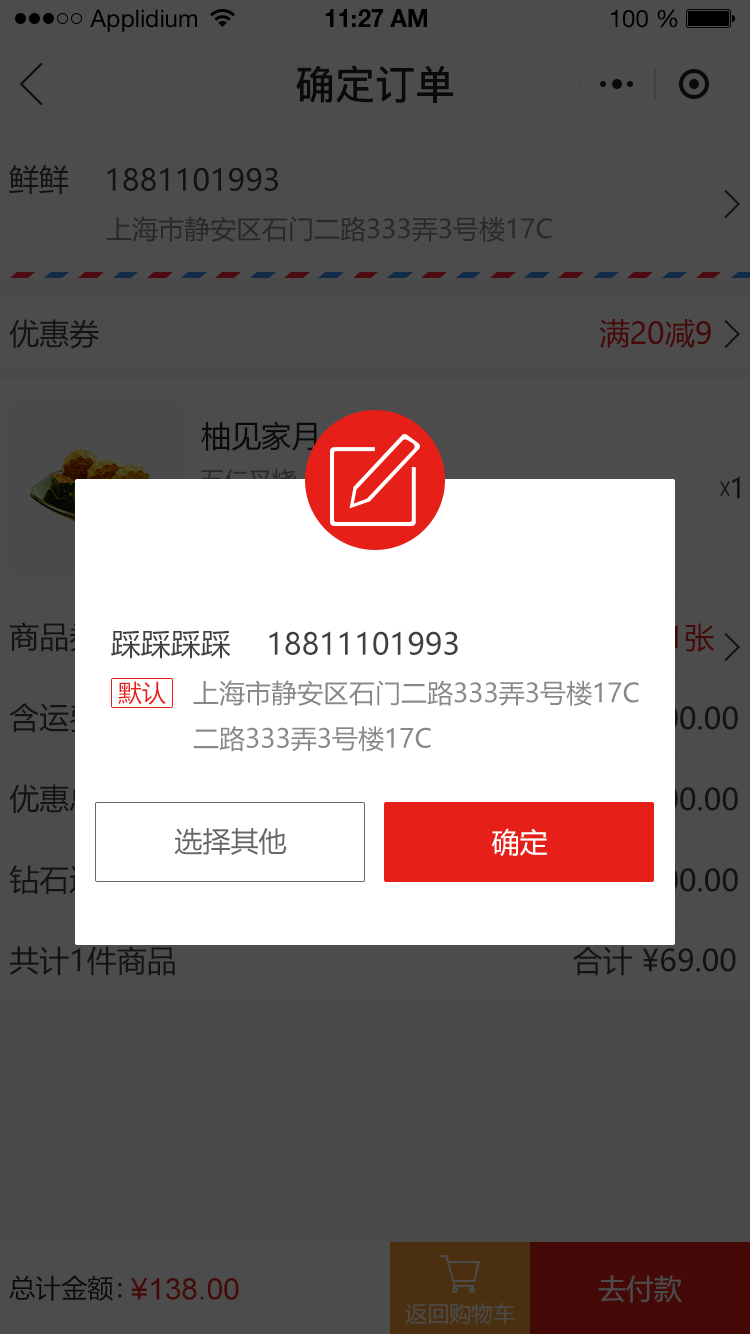
<style>
.page{position:relative;width:750px;height:1334px;background:#4c4c4c}
.page>*{position:absolute;margin:0}
.t1{font:24px "HelveticaNeueLTStd-Roman";color:#000000}
.t2{font:24px "HelveticaNeueLTStd-Bd";color:#000000}
.t3{font:40px "PingFang-SC-Bold";color:#202020;text-transform:uppercase}
.t4{font:30px "MicrosoftYaHei";color:#131313;text-transform:uppercase}
.t5{font:26px "MicrosoftYaHei";color:#292929;text-transform:uppercase}
.t6{font:30px "MicrosoftYaHei";color:#450907;text-transform:uppercase}
.t7{font:30px "MicrosoftYaHei";color:#202020;text-transform:uppercase}
.t8{font:28px "MicrosoftYaHei";color:#131313;text-transform:uppercase}
.t9{font:30px "MicrosoftYaHei";color:#404040;text-transform:uppercase}
.t10{font:24px "MicrosoftYaHei";color:#e61f18;text-transform:uppercase}
.t11{font:26px "MicrosoftYaHei";color:#888888;text-transform:uppercase}
.t12{font:28px "MicrosoftYaHei";color:#666666;text-transform:uppercase}
.t13{font:28px "MicrosoftYaHei";color:#ffffff;text-transform:uppercase}
.t14{font:26px "MicrosoftYaHei";color:#202020;text-transform:uppercase}
.t15{font:30px "ArialMT";color:#450907;text-transform:uppercase}
.t16{font:28px "MicrosoftYaHei";color:#4c4c4c;text-transform:uppercase}
.t17{font:22px "MicrosoftYaHei";color:#4c4c4c;text-transform:uppercase}
</style>
<div class="page">
<p class="t1" style="left:90px;top:9px;width:107px;height:23px">Applidium</p>
<p class="t2" style="left:325px;top:9px;width:102px;height:18px">11:27 AM</p>
<p class="t1" style="left:611px;top:9px;width:67px;height:19px">100 %</p>
<p class="t3" style="left:296px;top:65px;width:157px;height:38px">确定订单</p>
<p class="t4" style="left:9px;top:165px;width:60px;height:30px">鲜鲜</p>
<p class="t4" style="left:107px;top:167px;width:171px;height:24px">1881101993</p>
<p class="t5" style="left:106px;top:216px;width:446px;height:26px">上海市静安区石门二路333弄3号楼17c</p>
<p class="t4" style="left:9px;top:319px;width:90px;height:30px">优惠券</p>
<p class="t6" style="left:599px;top:319px;width:112px;height:29px">满20减9</p>
<p class="t7" style="left:201px;top:421px;width:116px;height:30px">柚见家月</p>
<p class="t8" style="left:732px;top:476px;width:8px;height:23px">1</p>
<p class="t9" style="left:111px;top:630px;width:120px;height:29px">踩踩踩踩</p>
<p class="t6" style="left:669px;top:623px;width:46px;height:29px">1张</p>
<p class="t9" style="left:269px;top:631px;width:189px;height:24px">18811101993</p>
<p class="t10" style="left:118px;top:681px;width:48px;height:24px">默认</p>
<p class="t11" style="left:193px;top:680px;width:446px;height:72px">上海市静安区石门二路333弄3号楼17c<br>二路333弄3号楼17c</p>
<p class="t12" style="left:174px;top:828px;width:113px;height:27px">选择其他</p>
<p class="t13" style="left:491px;top:828px;width:57px;height:29px">确定</p>
<p class="t4" style="left:10px;top:946px;width:165px;height:30px">共计1件商品</p>
<p class="t4" style="left:573px;top:946px;width:163px;height:30px">合计 ¥69.00</p>
<p class="t14" style="left:9px;top:1275px;width:113px;height:26px">总计金额：</p>
<p class="t15" style="left:131px;top:1278px;width:108px;height:22px">¥138.00</p>
<p class="t16" style="left:598px;top:1275px;width:84px;height:28px">去付款</p>
<p class="t17" style="left:405px;top:1302px;width:110px;height:23px">返回购物车</p>
</div>
